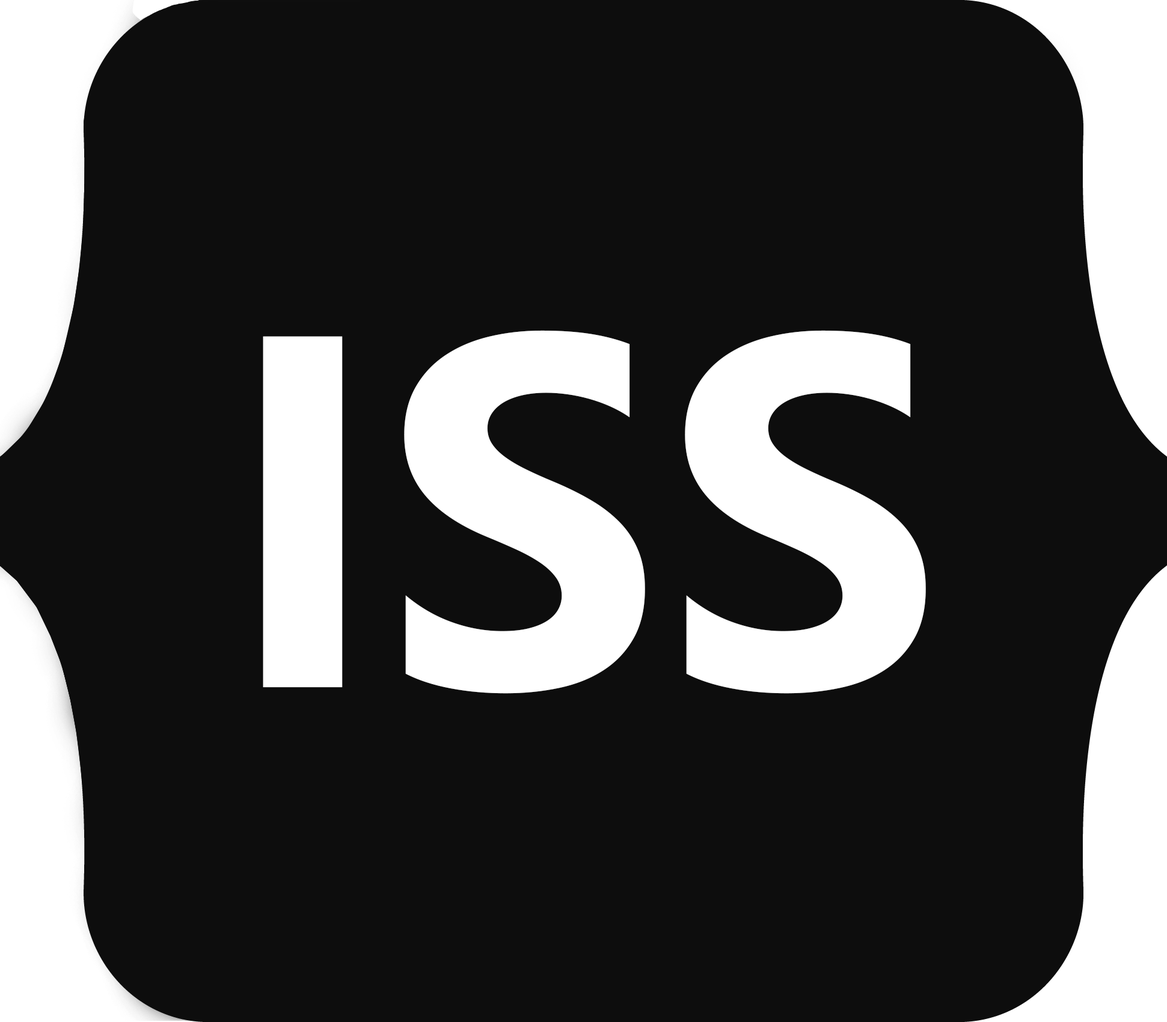
<style>
.page{position:relative;width:1167px;height:1022px;background:#0d0d0d}
.page>*{position:absolute;margin:0}
.t1{font:501px "SegoeUI-Bold";color:#ffffff}
</style>
<div class="page">
<p class="t1" style="left:263px;top:330px;width:663px;height:364px">ISS</p>
</div>
